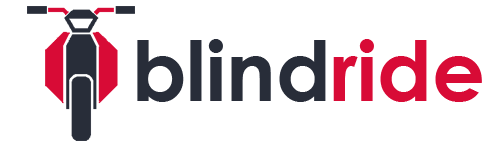
<style>
.page{position:relative;width:504px;height:144px;background:#ffffff}
.page>*{position:absolute;margin:0}
.t1{font:83px "CenturyGothic-Bold";color:#282d39}
.t2{font:83px "CenturyGothic-Bold";color:#d80b36}
</style>
<div class="page">
<p class="t1" style="left:137px;top:39px;width:345px;height:63px">blind<span class="t2">ride</span></p>
</div>
